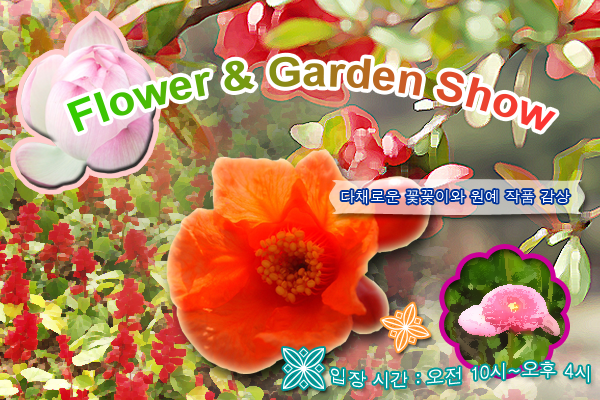
<style>
.page{position:relative;width:600px;height:400px}
.page>*{position:absolute;margin:0}
.t1{font:42px "Arial-BoldMT"}
.t2{font:15px "Dotum";color:#ffffff}
.t3{font:18px "Dotum";color:#ffffff}
</style>
<div class="page">
<p class="t1" style="left:66px;top:56px;width:490px;height:76px;text-align:right">Flower &amp; Garden Show</p>
<p class="t2" style="left:341px;top:190px;width:229px;height:14px">다채로운 꽃꽂이와 원예 작품 감상</p>
<p class="t3" style="left:331px;top:361px;width:259px;height:28px">입장 시간 : 오전 10시~오후 4시</p>
</div>
